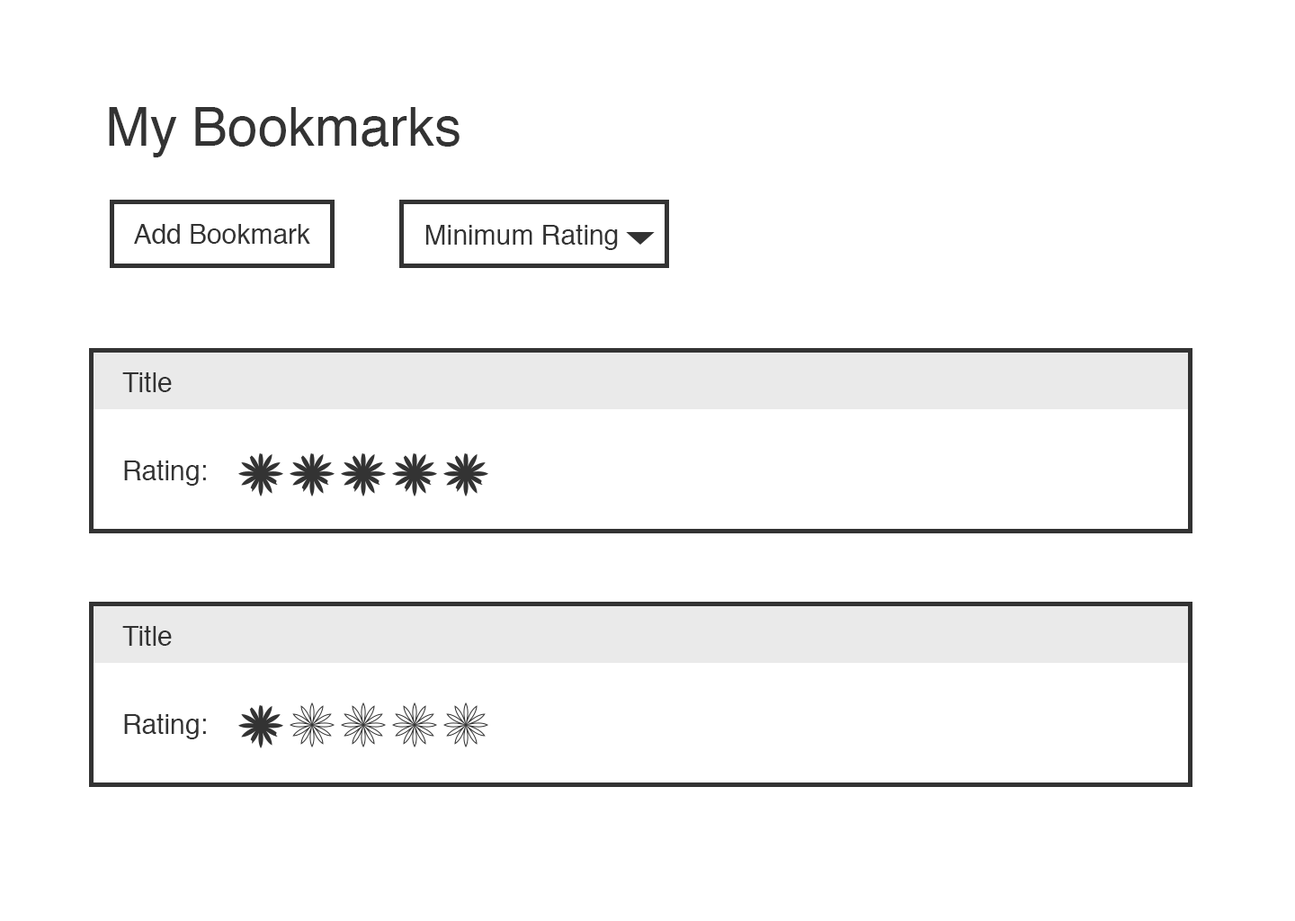
<style>
.page{position:relative;width:1295px;height:921px;background:#ffffff}
.page>*{position:absolute;margin:0}
.t1{font:54px "Helvetica";color:#333333}
.t2{font:27px "Helvetica";color:#333333}
</style>
<div class="page">
<p class="t1" style="left:109px;top:107px;width:351px;height:50px">My Bookmarks</p>
<p class="t2" style="left:134px;top:224px;width:176px;height:20px">Add Bookmark</p>
<p class="t2" style="left:425px;top:225px;width:193px;height:25px">Minimum Rating</p>
<p class="t2" style="left:122px;top:372px;width:50px;height:20px">Title</p>
<p class="t2" style="left:124px;top:460px;width:82px;height:26px">Rating:</p>
<p class="t2" style="left:122px;top:626px;width:50px;height:20px">Title</p>
<p class="t2" style="left:124px;top:714px;width:82px;height:25px">Rating:</p>
</div>
